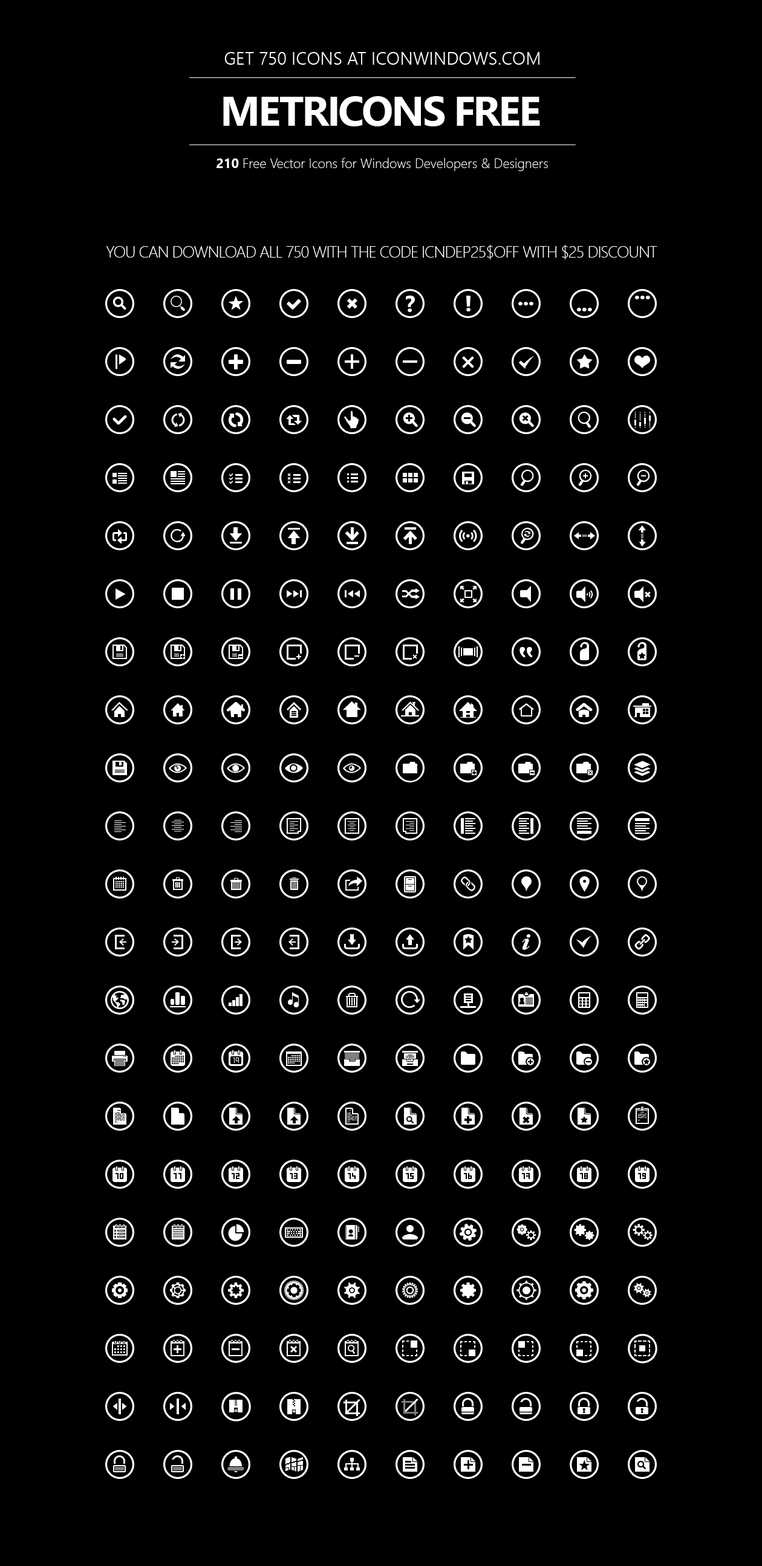
<style>
.page{position:relative;width:762px;height:1566px;background:#000000}
.page>*{position:absolute;margin:0}
.t1{font:17.8px "SegoeUI-Semilight";color:#ffffff;text-transform:uppercase}
.t2{font:41.9px "SegoeUI-Bold";letter-spacing:-0.05em;color:#ffffff;text-transform:uppercase}
.t3{font:13.3px "SegoeUI-Light";color:#ffffff}
.t4{font:13.3px "SegoeUI-Bold";color:#ffffff}
.t5{font:16.4px "SegoeUI-Light";letter-spacing:-0.05em;color:#ffffff;text-transform:uppercase}
</style>
<div class="page">
<p class="t1" style="left:224px;top:52px;width:315px;height:13px">GET 750 ICONS AT iconwindows.com</p>
<p class="t2" style="left:223px;top:96px;width:317px;height:30px">METRICONS FREE</p>
<p class="t3" style="left:216px;top:158px;width:332px;height:13px"><span class="t4">210</span> Free Vector Icons for Windows Developers &amp; Designers</p>
<p class="t5" style="left:106px;top:245px;width:551px;height:14px">You can download all 750 with the code ICNDEP25$OFF with $25 discount</p>
</div>
